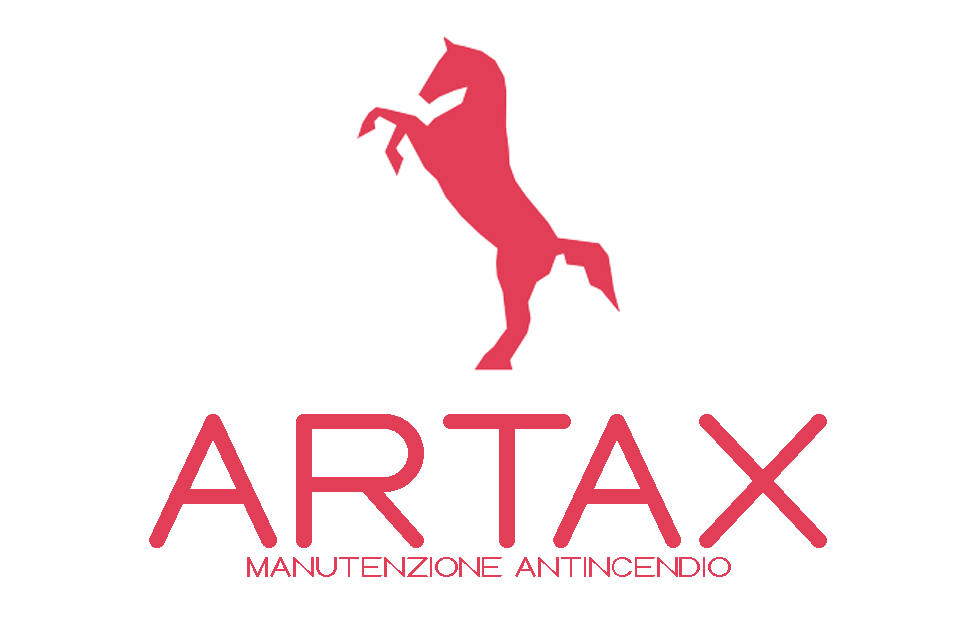
<style>
.page{position:relative;width:976px;height:625px;background:#ffffff}
.page>*{position:absolute;margin:0}
.t1{font:28.6px "QueentalBold";color:#e23e57}
.t2{font:183.7px "QueentalBold";color:#e23e57}
</style>
<div class="page">
<p class="t1" style="left:149px;top:414px;width:678px;height:163px;text-align:center"><span class="t2">artax<br></span>manutenzione antincendio</p>
</div>
